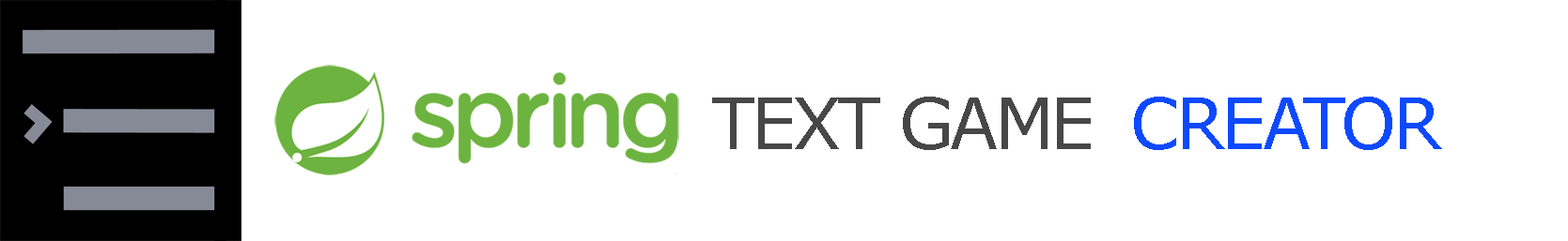
<style>
.page{position:relative;width:1568px;height:241px;background:#ffffff}
.page>*{position:absolute;margin:0}
.t1{font:70.5px "Verdana";letter-spacing:-0.05em;color:#474747}
.t2{font:70.5px "Verdana";letter-spacing:-0.05em;color:#0d4aff}
</style>
<div class="page">
<p class="t1" style="left:712px;top:97px;width:730px;height:53px">TEXT GAME <span class="t2">CREATOR</span></p>
</div>
